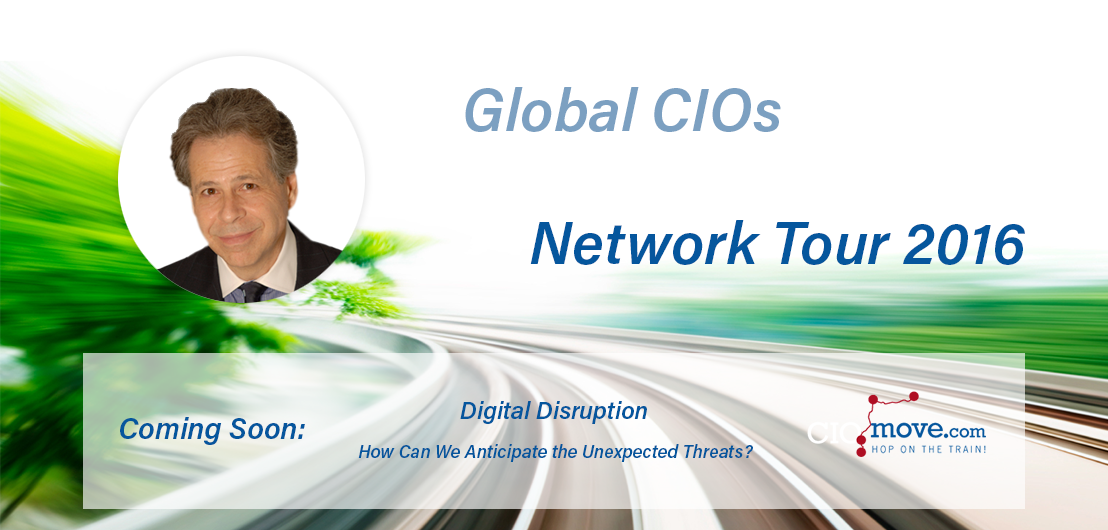
<style>
.page{position:relative;width:1108px;height:530px;background:#ffffff}
.page>*{position:absolute;margin:0}
.t1{font:60px "AcuminPro-SemiboldItalic";color:#7ca0c1}
.t2{font:60px "AcuminPro-SemiboldItalic";color:#05569d}
.t3{font:24px "AcuminPro-SemiboldItalic";color:#05569d}
.t4{font:30px "AcuminPro-SemiboldItalic";color:#05569d}
.t5{font:18px "AcuminPro-SemiboldItalic";color:#05569d}
</style>
<div class="page">
<p class="t1" style="left:465px;top:87px;width:316px;height:45px">Global CIOs</p>
<p class="t2" style="left:530px;top:220px;width:495px;height:45px">Network Tour 2016</p>
<p class="t3" style="left:460px;top:401px;width:187px;height:23px">Digital Disruption</p>
<p class="t4" style="left:120px;top:417px;width:185px;height:28px">Coming Soon:</p>
<p class="t5" style="left:358px;top:444px;width:395px;height:18px">How Can We Anticipate the Unexpected Threats?</p>
</div>
